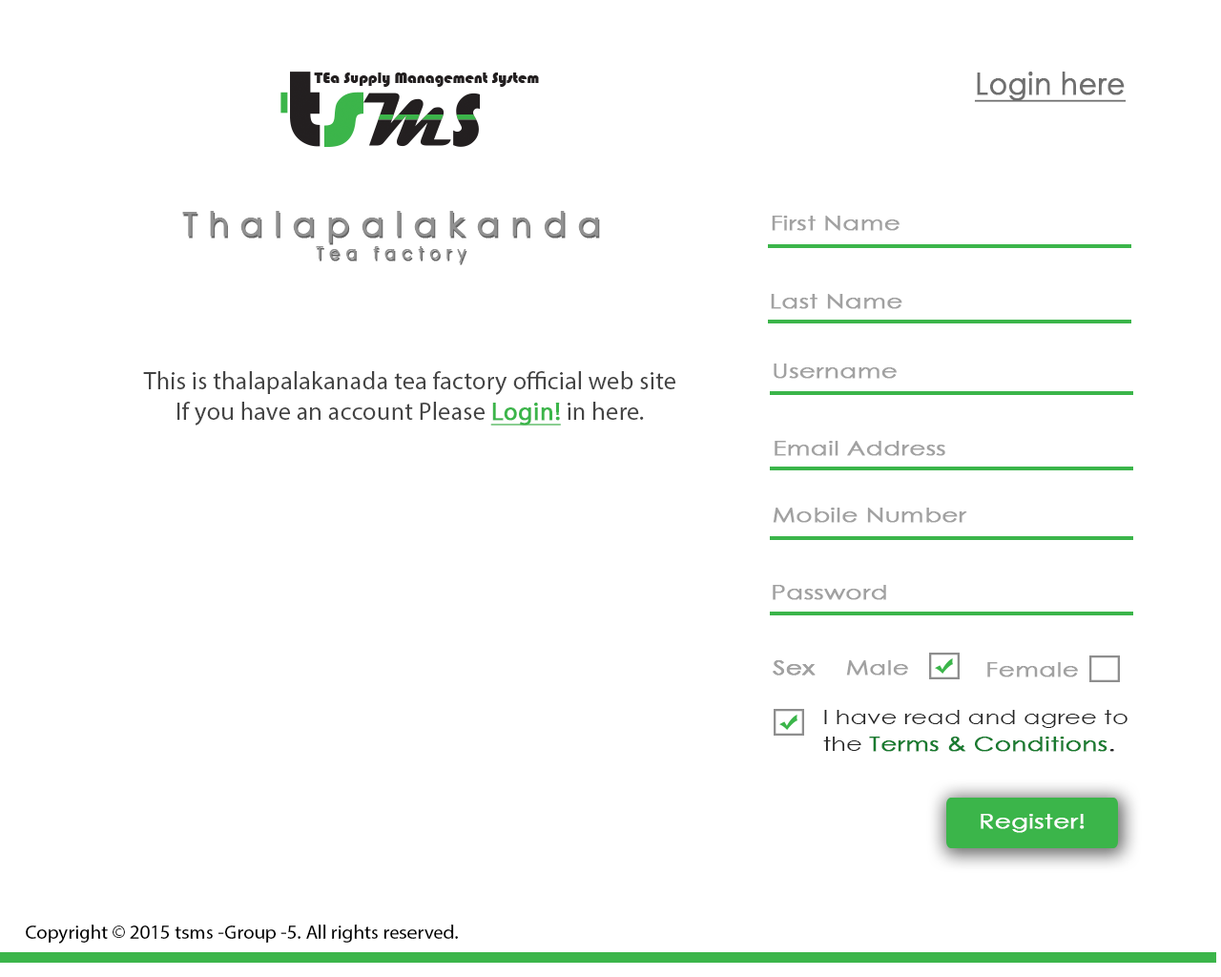
<style>
.page{position:relative;width:1221px;height:977px;background:#ffffff}
.page>*{position:absolute;margin:0}
.t1{font:30.1px "CenturyGothic";color:#6f6f6f;font-weight:bold;text-decoration:underline;scale:0.93 1}
.t2{font:33.4px "CenturyGothic";letter-spacing:0.32em;color:#919191;font-weight:bold}
.t3{font:16.7px "CenturyGothic";letter-spacing:0.32em;color:#919191;font-weight:bold}
.t4{font:20.3px "CenturyGothic";color:#a1a1a1;font-weight:bold;scale:1.22 1}
.t5{font:25.4px "MyriadPro-Regular";color:#444444}
.t6{font:25.4px "MyriadPro-Regular";color:#3bb54a;font-weight:bold;text-decoration:underline}
.t7{font:20.3px "CenturyGothic";color:#252525;scale:1.22 1}
.t8{font:20.3px "CenturyGothic";color:#197b30;font-weight:bold;scale:1.22 1}
.t9{font:20.3px "CenturyGothic";color:#252525;font-weight:bold;scale:1.22 1}
.t10{font:20.3px "CenturyGothic";color:#ffffff;font-weight:bold;scale:1.22 1}
.t11{font:19.9px "MyriadPro-Regular";color:#000000}
</style>
<div class="page">
<p class="t1" style="left:974px;top:72px;width:152px;height:30px">Login here</p>
<p class="t2" style="left:182px;top:211px;width:417px;height:52px;text-align:center">Thalapalakanda<br><span class="t3">Tea factory</span></p>
<p class="t4" style="left:772px;top:216px;width:127px;height:15px">First Name</p>
<p class="t4" style="left:771px;top:294px;width:131px;height:15px">Last Name</p>
<p class="t4" style="left:774px;top:363px;width:123px;height:16px">Username</p>
<p class="t5" style="left:143px;top:371px;width:532px;height:54px;text-align:center">This is thalapalakanada tea factory official web site<br>If you have an account Please <span class="t6">Login!</span> in here.</p>
<p class="t4" style="left:774px;top:441px;width:171px;height:15px">Email Address</p>
<p class="t4" style="left:773px;top:507px;width:194px;height:16px">Mobile Number</p>
<p class="t4" style="left:773px;top:585px;width:113px;height:15px">Password</p>
<p class="t4" style="left:773px;top:660px;width:43px;height:15px">Sex</p>
<p class="t4" style="left:773px;top:660px;width:43px;height:15px">Sex</p>
<p class="t4" style="left:846px;top:660px;width:62px;height:15px">Male</p>
<p class="t4" style="left:987px;top:662px;width:91px;height:15px">Female</p>
<p class="t7" style="left:823px;top:710px;width:304px;height:42px">I have read and agree to <br>the <span class="t8">Terms &amp; Conditions</span><span class="t9">.</span></p>
<p class="t10" style="left:981px;top:814px;width:103px;height:19px">Register!</p>
<p class="t11" style="left:26px;top:924px;width:432px;height:19px">Copyright © 2015 tsms -Group -5. All rights reserved.</p>
</div>
